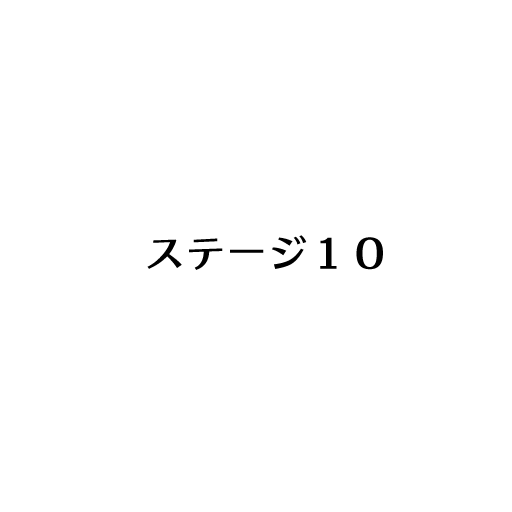
<style>
.page{position:relative;width:512px;height:512px;background:#ffffff}
.page>*{position:absolute;margin:0}
.t1{font:41px "SicPrintempsPetitE";color:#000000}
</style>
<div class="page">
<p class="t1" style="left:147px;top:235px;width:236px;height:35px">ステージ１０</p>
</div>
